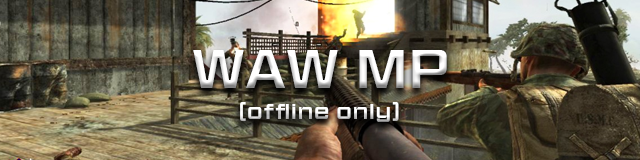
<style>
.page{position:relative;width:640px;height:160px}
.page>*{position:absolute;margin:0}
.t1{font:50px "HitmarkerNormal-Regular";letter-spacing:0.12em;color:#ffffff}
.t2{font:20px "HitmarkerNormal-Regular";letter-spacing:0.12em}
</style>
<div class="page">
<p class="t1" style="left:193px;top:50px;width:254px;height:38px">WAW MP</p>
<p class="t2" style="left:240px;top:102px;width:159px;height:20px">(offline only)</p>
</div>
